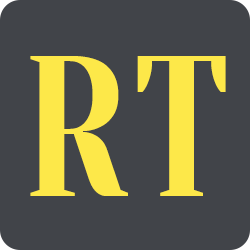
<style>
.page{position:relative;width:250px;height:250px;background:#414449}
.page>*{position:absolute;margin:0}
.t1{font:200px "YesevaOne-Regular";letter-spacing:0.05em;color:#fde849}
</style>
<div class="page">
<p class="t1" style="left:30px;top:56px;width:196px;height:140px">RT</p>
</div>
